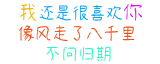
<style>
.page{position:relative;width:160px;height:64px;background:#ffffff}
.page>*{position:absolute;margin:0}
.t1{font:17px "JasonWriting";color:#ef5017}
.t2{font:20px "JasonWriting";color:#efba17}
.t3{font:17px "JasonWriting";color:#17a5ef}
.t4{font:20px "JasonWriting";color:#e113f3}
.t5{font:17px "JasonWriting";color:#2ff7bd}
</style>
<div class="page">
<p class="t1" style="left:19px;top:3px;width:124px;height:59px"><span class="t2">我</span><span class="t3">还是很喜欢</span><span class="t4">你<br></span>像风走了八千里<br>   <span class="t5">不问归期</span></p>
</div>
